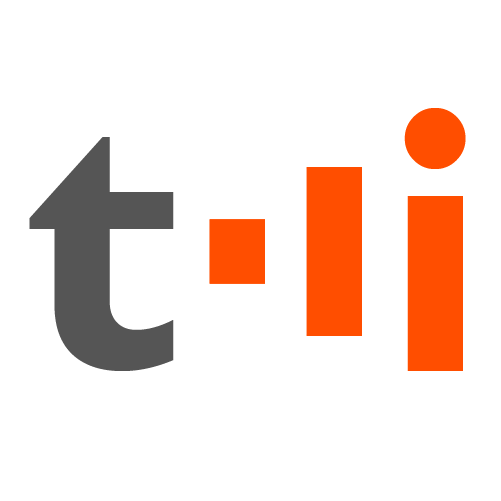
<style>
.page{position:relative;width:501px;height:501px;background:#ffffff}
.page>*{position:absolute;margin:0}
.t1{font:378.7px "GillSansMT-Bold";letter-spacing:-0.01em;color:#ff4e00}
.t2{font:378.7px "GillSansMT-Bold";letter-spacing:-0.01em;color:#555555}
</style>
<div class="page">
<p class="t1" style="left:404px;top:108px;width:62px;height:263px">i</p>
<p class="t2" style="left:29px;top:137px;width:145px;height:234px">t</p>
</div>
